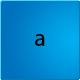
<style>
.page{position:relative;width:80px;height:80px}
.page>*{position:absolute;margin:0}
.t1{font:24px "MyriadPro-Regular";color:#000000}
</style>
<div class="page">
<p class="t1" style="left:35px;top:34px;width:10px;height:12px">a</p>
</div>
